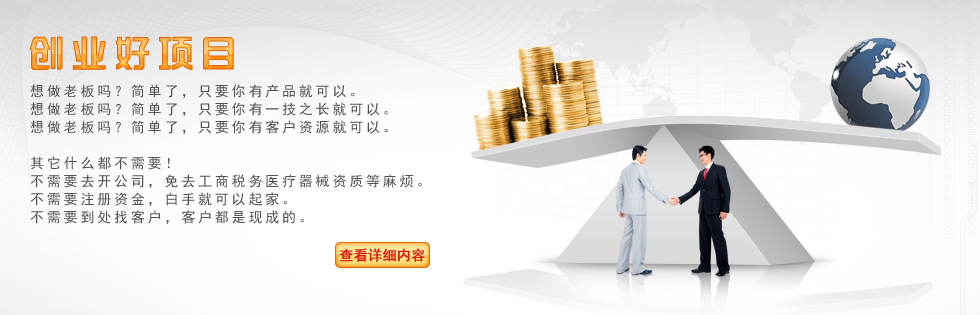
<style>
.page{position:relative;width:980px;height:315px}
.page>*{position:absolute;margin:0}
.t1{font:36px "hzgb";letter-spacing:0.2em}
.t2{font:14px/18px "SimHei";letter-spacing:0.2em;color:#525252}
.t3{font:14px "SimHei";color:#d5190b;font-weight:bold}
</style>
<div class="page">
<p class="t1" style="left:29px;top:36px;width:205px;height:35px">创业好项目</p>
<p class="t2" style="left:30px;top:84px;width:392px;height:140px">想做老板吗？简单了，只要你有产品就可以。<br>想做老板吗？简单了，只要你有一技之长就可以。<br>想做老板吗？简单了，只要你有客户资源就可以。<br><br>其它什么都不需要！<br>不需要去开公司，免去工商税务医疗器械资质等麻烦。<br>不需要注册资金，白手就可以起家。<br>不需要到处找客户，客户都是现成的。</p>
<p class="t3" style="left:339px;top:248px;width:86px;height:14px">查看详细内容</p>
</div>
